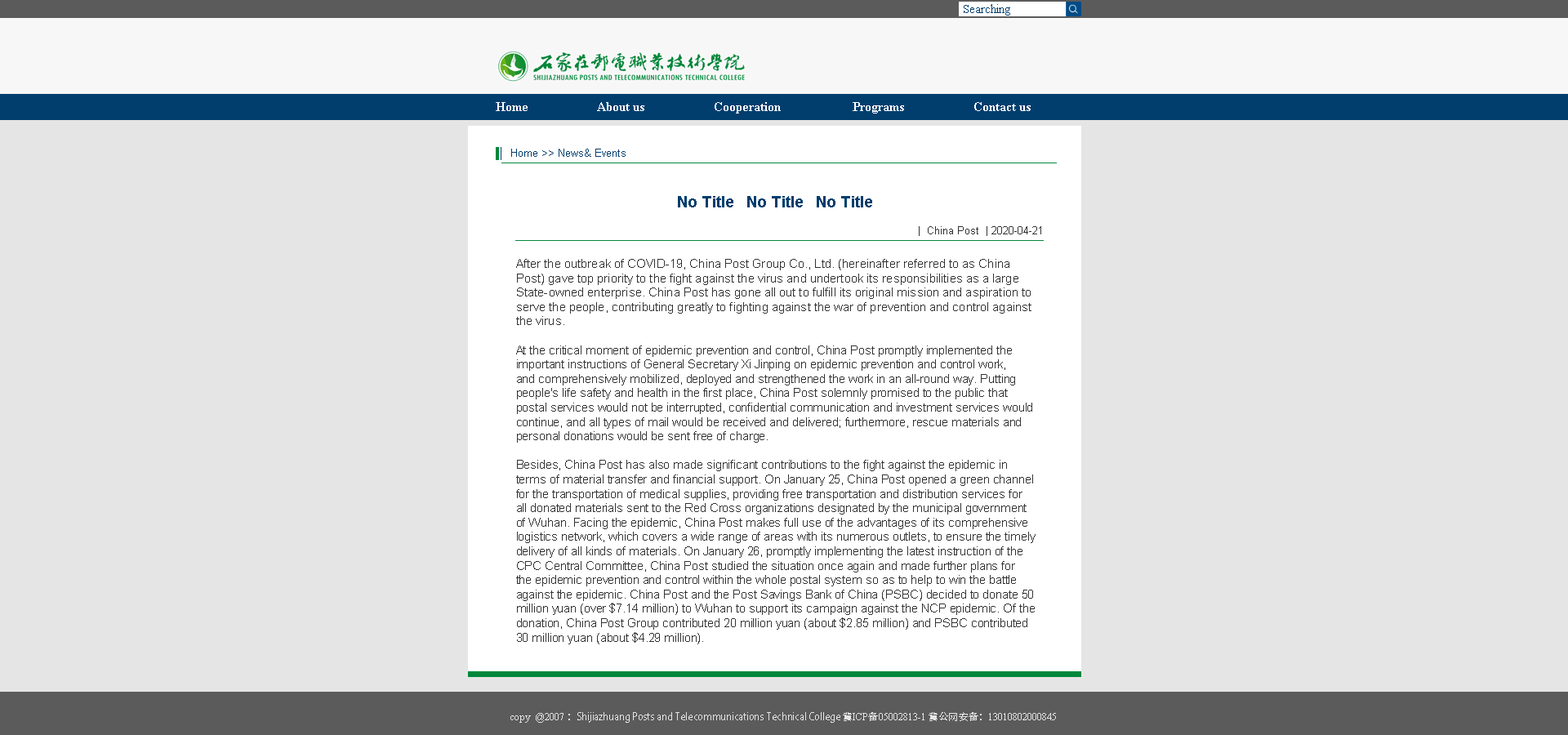
<style>
.page{position:relative;width:1568px;height:735px;background:#e5e5e5}
.page>*{position:absolute;margin:0}
.t1{font:12px "TimesNewRomanPSMT";color:#013e6e}
.t2{font:13.1px "TimesNewRomanPS-BoldMT";color:#ffffff}
.t3{font:10.9px "ArialMT";color:#013e6e}
.t4{font:15.2px "Arial-BoldMT";color:#013e6e}
.t5{font:10.9px "ArialMT";color:#323232}
.t6{font:12px "ArialMT";color:#323232}
.t7{font:9.8px "AdobeHeitiStd-Regular";color:#e5e5e5}
.t8{font:9.8px "TimesNewRomanPSMT";color:#e5e5e5}
</style>
<div class="page">
<p class="t1" style="left:964px;top:4px;width:46px;height:12px">Searching</p>
<p class="t2" style="left:496px;top:102px;width:535px;height:12px">Home                     About us                     Cooperation                      Programs                     Contact us</p>
<p class="t3" style="left:511px;top:149px;width:115px;height:8px">Home &gt;&gt; News&amp; Events</p>
<p class="t4" style="left:678px;top:196px;width:194px;height:11px">No Title   No Title   No Title</p>
<p class="t5" style="left:919px;top:226px;width:122px;height:10px">|  China Post  | 2020-04-21</p>
<p class="t6" style="left:516px;top:259px;width:520px;height:385px">After the outbreak of COVID-19, China Post Group Co., Ltd. (hereinafter referred to as China Post) gave top priority to the fight against the virus and undertook its responsibilities as a large State-owned enterprise. China Post has gone all out to fulfill its original mission and aspiration to serve the people, contributing greatly to fighting against the war of prevention and control against the virus.<br><br>At the critical moment of epidemic prevention and control, China Post promptly implemented the important instructions of General Secretary Xi Jinping on epidemic prevention and control work, and comprehensively mobilized, deployed and strengthened the work in an all-round way. Putting people's life safety and health in the first place, China Post solemnly promised to the public that postal services would not be interrupted, confidential communication and investment services would continue, and all types of mail would be received and delivered; furthermore, rescue materials and personal donations would be sent free of charge.<br><br>Besides, China Post has also made significant contributions to the fight against the epidemic in terms of material transfer and financial support. On January 25, China Post opened a green channel for the transportation of medical supplies, providing free transportation and distribution services for all donated materials sent to the Red Cross organizations designated by the municipal government of Wuhan. Facing the epidemic, China Post makes full use of the advantages of its comprehensive logistics network, which covers a wide range of areas with its numerous outlets, to ensure the timely delivery of all kinds of materials. On January 26, promptly implementing the latest instruction of the CPC Central Committee, China Post studied the situation once again and made further plans for the epidemic prevention and control within the whole postal system so as to help to win the battle against the epidemic. China Post and the Post Savings Bank of China (PSBC) decided to donate 50 million yuan (over $7.14 million) to Wuhan to support its campaign against the NCP epidemic. Of the donation, China Post Group contributed 20 million yuan (about $2.85 million) and PSBC contributed 30 million yuan (about $4.29 million).</p>
<p class="t7" style="left:510px;top:712px;width:546px;height:11px"><span class="t8">copy  @2007 </span>：Shijiazhuang Posts and Telecommunications Technical College 冀<span class="t8">ICP</span>备<span class="t8">05002813-1 </span>冀公网安备：<span class="t8">13010802000845</span></p>
</div>
